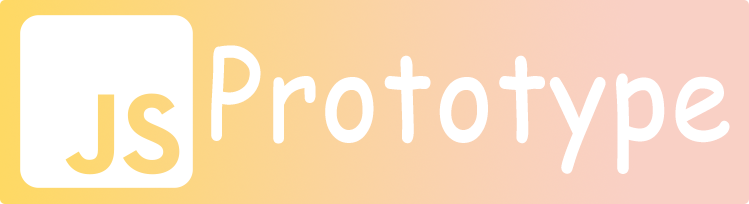
<style>
.page{position:relative;width:749px;height:204px;background:#ffffff}
.page>*{position:absolute;margin:0}
.t1{font:121.3px "ComicSansMS";color:#ffffff;font-weight:bold;scale:0.9 1}
</style>
<div class="page">
<p class="t1" style="left:211px;top:45px;width:519px;height:129px">Prototype</p>
</div>
